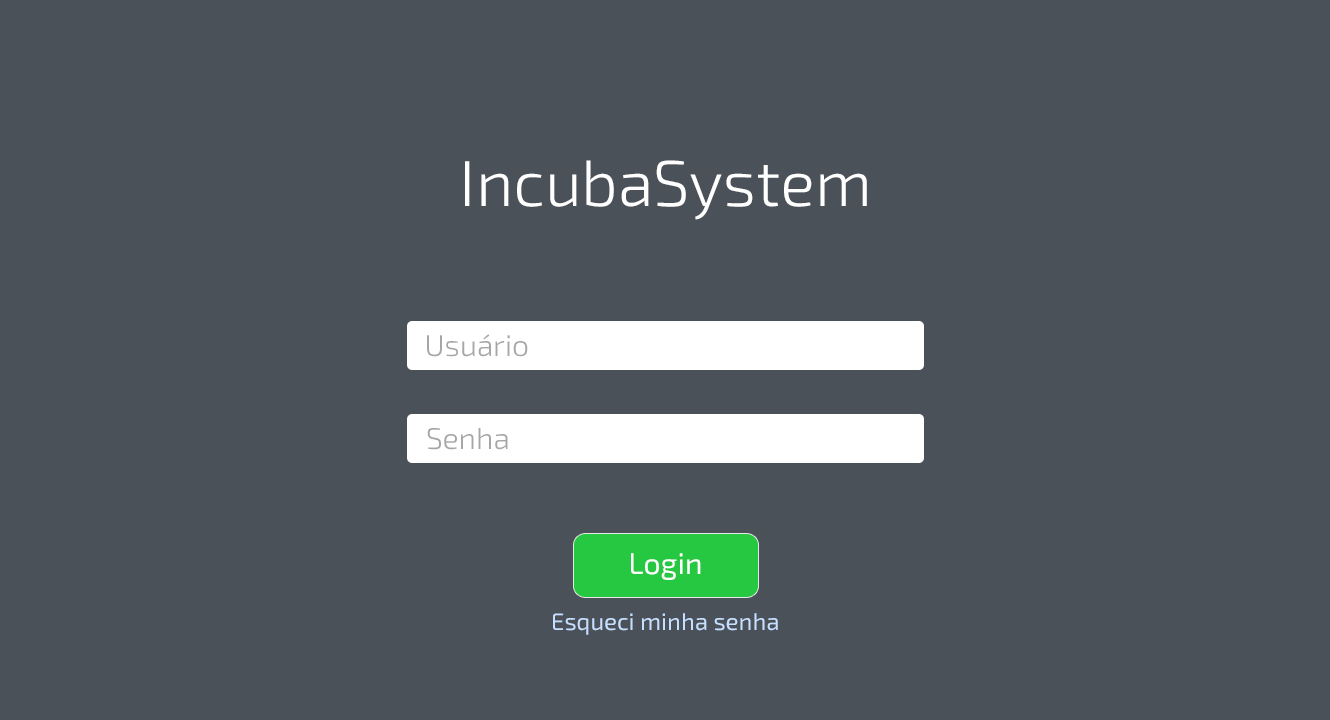
<style>
.page{position:relative;width:1330px;height:720px;background:#4b5158}
.page>*{position:absolute;margin:0}
.t1{font:65px "Exo2-Light";color:#ffffff}
.t2{font:30px "Exo2-Light";color:#a6a6a6}
.t3{font:30px "Exo2-Regular";color:#ffffff}
.t4{font:24px "Exo2-Regular";color:#c6deff}
</style>
<div class="page">
<p class="t1" style="left:465px;top:160px;width:402px;height:60px">IncubaSystem</p>
<p class="t2" style="left:427px;top:334px;width:101px;height:23px">Usuário</p>
<p class="t2" style="left:427px;top:428px;width:81px;height:22px">Senha</p>
<p class="t3" style="left:631px;top:553px;width:70px;height:27px">Login</p>
<p class="t4" style="left:553px;top:613px;width:225px;height:22px">Esqueci minha senha</p>
</div>
